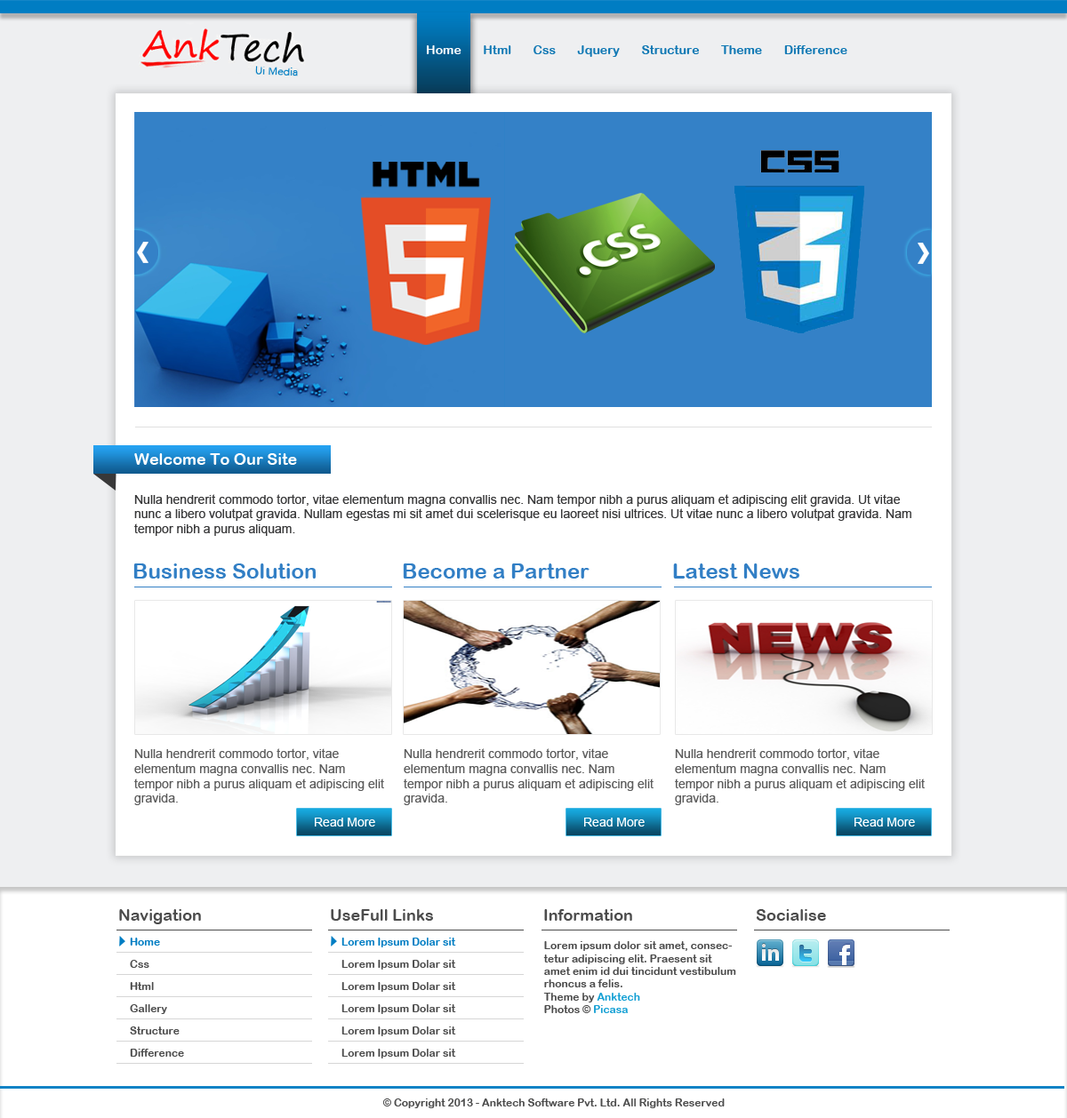
<style>
.page{position:relative;width:1067px;height:1118px;background:#ffffff}
.page>*{position:absolute;margin:0}
.t1{font:12.4px "ArialRoundedMTBold";color:#1078b4}
.t2{font:12.4px "ArialRoundedMTBold";color:#fefefe}
.t3{font:16px "ArialRoundedMTBold";color:#ffffff}
.t4{font:12.4px "ArialMT";color:#383839}
.t5{font:21.3px "ArialRoundedMTBold";color:#327fc5}
.t6{font:12.4px "ArialMT";color:#5c5c5c}
.t7{font:12.4px "ArialMT";color:#ffffff}
.t8{font:16px "ArialRoundedMTBold";color:#4c4c4c}
.t9{font:10.7px "ArialRoundedMTBold";color:#007dc3}
.t10{font:10.7px "ArialRoundedMTBold";color:#4c4c4c}
.t11{font:10.7px "ArialRoundedMTBold";color:#15a0d4}
</style>
<div class="page">
<p class="t1" style="left:427px;top:45px;width:420px;height:12px"><span class="t2">Home </span>      Html       Css       Jquery       Structure       Theme       Difference</p>
<p class="t3" style="left:134px;top:453px;width:163px;height:12px">Welcome To Our Site</p>
<p class="t4" style="left:134px;top:494px;width:777px;height:42px">Nulla hendrerit commodo tortor, vitae elementum magna convallis nec. Nam tempor nibh a purus aliquam et adipiscing elit gravida. Ut vitae nunc a libero volutpat gravida. Nullam egestas mi sit amet dui scelerisque eu laoreet nisi ultrices. Ut vitae nunc a libero volutpat gravida. Nam tempor nibh a purus aliquam.</p>
<p class="t5" style="left:133px;top:563px;width:183px;height:16px">Business Solution</p>
<p class="t5" style="left:403px;top:563px;width:186px;height:16px">Become a Partner</p>
<p class="t5" style="left:673px;top:563px;width:126px;height:16px">Latest News</p>
<p class="t6" style="left:134px;top:748px;width:250px;height:57px">Nulla hendrerit commodo tortor, vitae elementum magna convallis nec. Nam tempor nibh a purus aliquam et adipiscing elit gravida.</p>
<p class="t6" style="left:403px;top:748px;width:250px;height:57px">Nulla hendrerit commodo tortor, vitae elementum magna convallis nec. Nam tempor nibh a purus aliquam et adipiscing elit gravida.</p>
<p class="t6" style="left:675px;top:748px;width:249px;height:57px">Nulla hendrerit commodo tortor, vitae elementum magna convallis nec. Nam tempor nibh a purus aliquam et adipiscing elit gravida.</p>
<p class="t7" style="left:315px;top:818px;width:60px;height:9px">Read More</p>
<p class="t7" style="left:584px;top:818px;width:60px;height:9px">Read More</p>
<p class="t7" style="left:854px;top:818px;width:61px;height:9px">Read More</p>
<p class="t8" style="left:119px;top:909px;width:82px;height:15px">Navigation</p>
<p class="t8" style="left:331px;top:909px;width:102px;height:12px">UseFull Links</p>
<p class="t8" style="left:544px;top:909px;width:88px;height:12px">Information</p>
<p class="t8" style="left:755px;top:909px;width:71px;height:12px">Socialise</p>
<p class="t9" style="left:130px;top:938px;width:30px;height:8px">Home</p>
<p class="t9" style="left:341px;top:938px;width:115px;height:9px">Lorem Ipsum Dolar sit</p>
<p class="t10" style="left:543px;top:941px;width:193px;height:72px">Lorem ipsum dolor sit amet, consectetur adipiscing elit. Praesent sit amet enim id dui tincidunt vestibulum rhoncus a felis.<br>Theme by <span class="t11">Anktech<br></span>Photos ©<span class="t11"> Picasa</span></p>
<p class="t10" style="left:130px;top:960px;width:19px;height:8px">Css</p>
<p class="t10" style="left:341px;top:960px;width:115px;height:10px">Lorem Ipsum Dolar sit</p>
<p class="t10" style="left:130px;top:982px;width:24px;height:8px">Html</p>
<p class="t10" style="left:341px;top:982px;width:115px;height:10px">Lorem Ipsum Dolar sit</p>
<p class="t10" style="left:130px;top:1004px;width:37px;height:10px">Gallery</p>
<p class="t10" style="left:341px;top:1004px;width:115px;height:10px">Lorem Ipsum Dolar sit</p>
<p class="t10" style="left:130px;top:1027px;width:50px;height:8px">Structure</p>
<p class="t10" style="left:341px;top:1027px;width:115px;height:9px">Lorem Ipsum Dolar sit</p>
<p class="t10" style="left:130px;top:1049px;width:54px;height:8px">Difference</p>
<p class="t10" style="left:341px;top:1049px;width:115px;height:10px">Lorem Ipsum Dolar sit</p>
<p class="t10" style="left:382px;top:1099px;width:342px;height:9px">© Copyright 2013 - Anktech Software Pvt. Ltd. All Rights Reserved</p>
</div>
